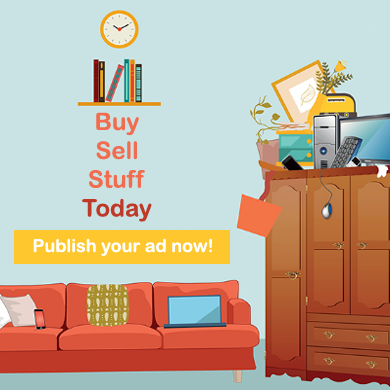
<style>
.page{position:relative;width:390px;height:390px;background:#c9e3e4}
.page>*{position:absolute;margin:0}
.t1{font:24px "ArialRoundedMTBold";color:#f26c4f}
.t2{font:24px "ArialRoundedMTBold";color:#be3928}
.t3{font:18px "ArialRoundedMTBold";color:#ffffff}
</style>
<div class="page">
<p class="t1" style="left:82px;top:112px;width:70px;height:110px;text-align:center">Buy<br>Sell<br>Stuff<br><span class="t2">Today</span></p>
<p class="t3" style="left:33px;top:238px;width:179px;height:18px">Publish your ad now!</p>
</div>
